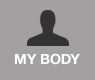
<style>
.page{position:relative;width:95px;height:80px;background:#a2a0a1}
.page>*{position:absolute;margin:0}
.t1{font:14px "HelveticaNeue-Bold";color:#feffff}
</style>
<div class="page">
<p class="t1" style="left:15px;top:53px;width:65px;height:12px">MY BODY</p>
</div>
